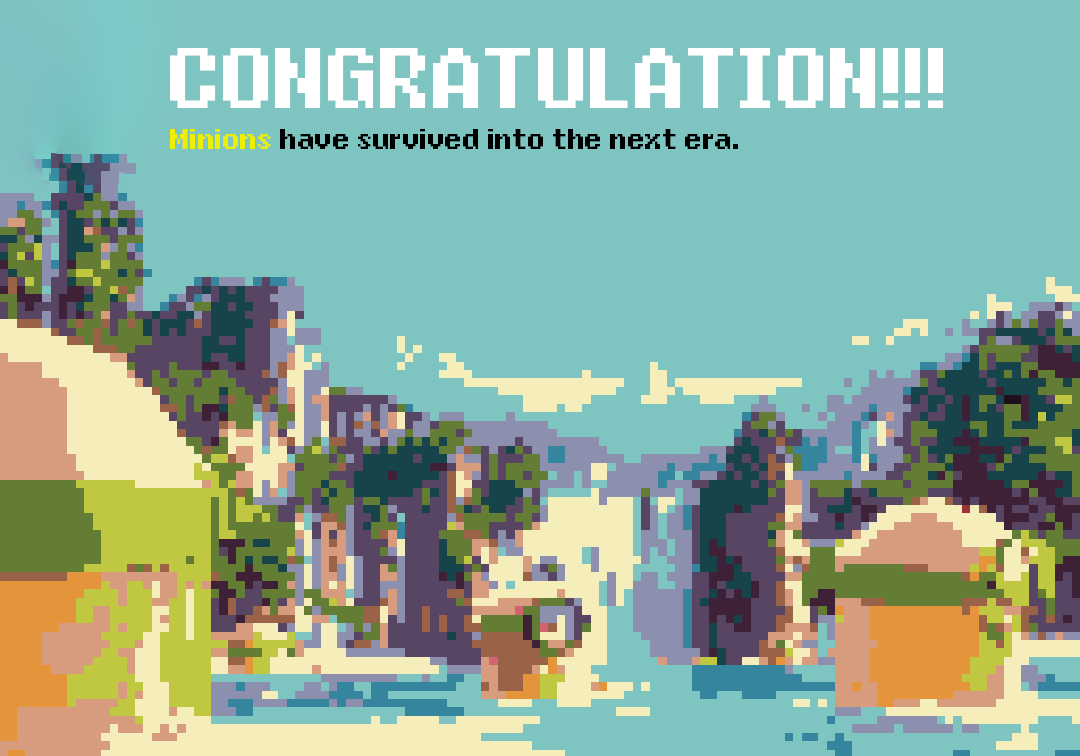
<style>
.page{position:relative;width:1080px;height:756px;background:#7ec4c1}
.page>*{position:absolute;margin:0}
.t1{font:120px "Nihonium113";color:#ffffff}
.t2{font:40px "Nihonium113";color:#000000}
.t3{font:40px "Nihonium113";color:#eeee00}
</style>
<div class="page">
<p class="t1" style="left:170px;top:48px;width:773px;height:60px">CONGRATULATION!!!</p>
<p class="t2" style="left:170px;top:129px;width:568px;height:20px"><span class="t3">Minions</span> have survived into the next era.</p>
</div>
